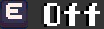
<style>
.page{position:relative;width:104px;height:29px;background:#333333}
.page>*{position:absolute;margin:0}
.t1{font:30px "ManaspaceReg";color:#ffffff}
</style>
<div class="page">
<p class="t1" style="left:44px;top:3px;width:56px;height:23px">Off</p>
</div>
